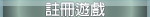
<style>
.page{position:relative;width:150px;height:17px}
.page>*{position:absolute;margin:0}
.t1{font:15px "AdobeFanHeitiStd-Bold";color:#ffffff}
</style>
<div class="page">
<p class="t1" style="left:45px;top:2px;width:60px;height:15px">註冊遊戲</p>
</div>
